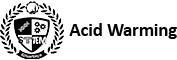
<style>
.page{position:relative;width:177px;height:60px;background:#ffffff}
.page>*{position:absolute;margin:0}
.t1{font:18.5px "Calibri-Bold";color:#050505}
</style>
<div class="page">
<p class="t1" style="left:69px;top:23px;width:108px;height:16px">Acid Warming</p>
</div>
